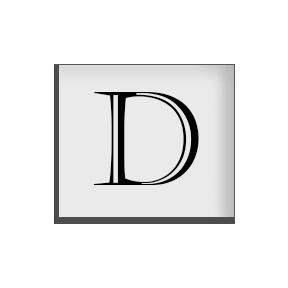
<style>
.page{position:relative;width:288px;height:288px;background:#ffffff}
.page>*{position:absolute;margin:0}
.t1{font:130px "Castellar";color:#000000}
</style>
<div class="page">
<p class="t1" style="left:93px;top:92px;width:106px;height:93px">D</p>
</div>
